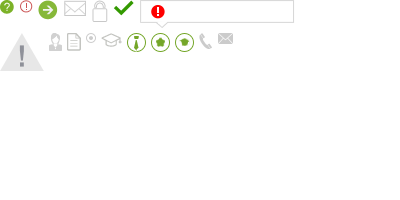
<style>
.page{position:relative;width:400px;height:200px;background:#ffffff}
.page>*{position:absolute;margin:0}
.t1{font:11.6px "01 Starmap"}
.t2{font:9px "MicrosoftYaHei";color:#cb5454}
</style>
<div class="page">
<p class="t1" style="left:4px;top:2px;width:6px;height:9px">?</p>
<p class="t2" style="left:26px;top:3px;width:1px;height:7px">!</p>
</div>
